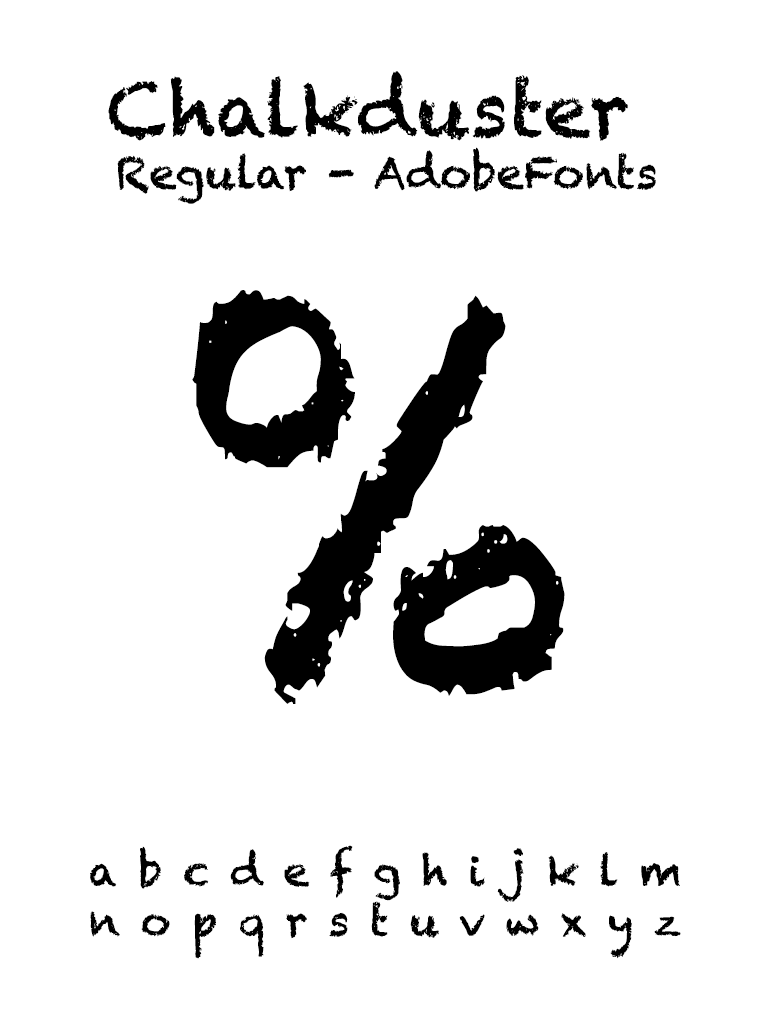
<style>
.page{position:relative;width:768px;height:1024px;background:#ffffff}
.page>*{position:absolute;margin:0}
.t1{font:43.7px "Chalkduster";color:#000000}
.t2{font:74.9px "Chalkduster";color:#000000}
.t3{font:481.2px "Chalkduster";color:#000000}
.t4{font:41.7px "Chalkduster";color:#000000}
</style>
<div class="page">
<p class="t1" style="left:108px;top:71px;width:548px;height:133px;text-align:center"><span class="t2">Chalkduster <br></span>Regular - AdobeFonts</p>
<p class="t3" style="left:192px;top:290px;width:373px;height:414px">%</p>
<p class="t4" style="left:90px;top:845px;width:591px;height:114px;text-align:center">a b c d e f g h i j k l m<br>n o p q r s t u v w x y z</p>
</div>
